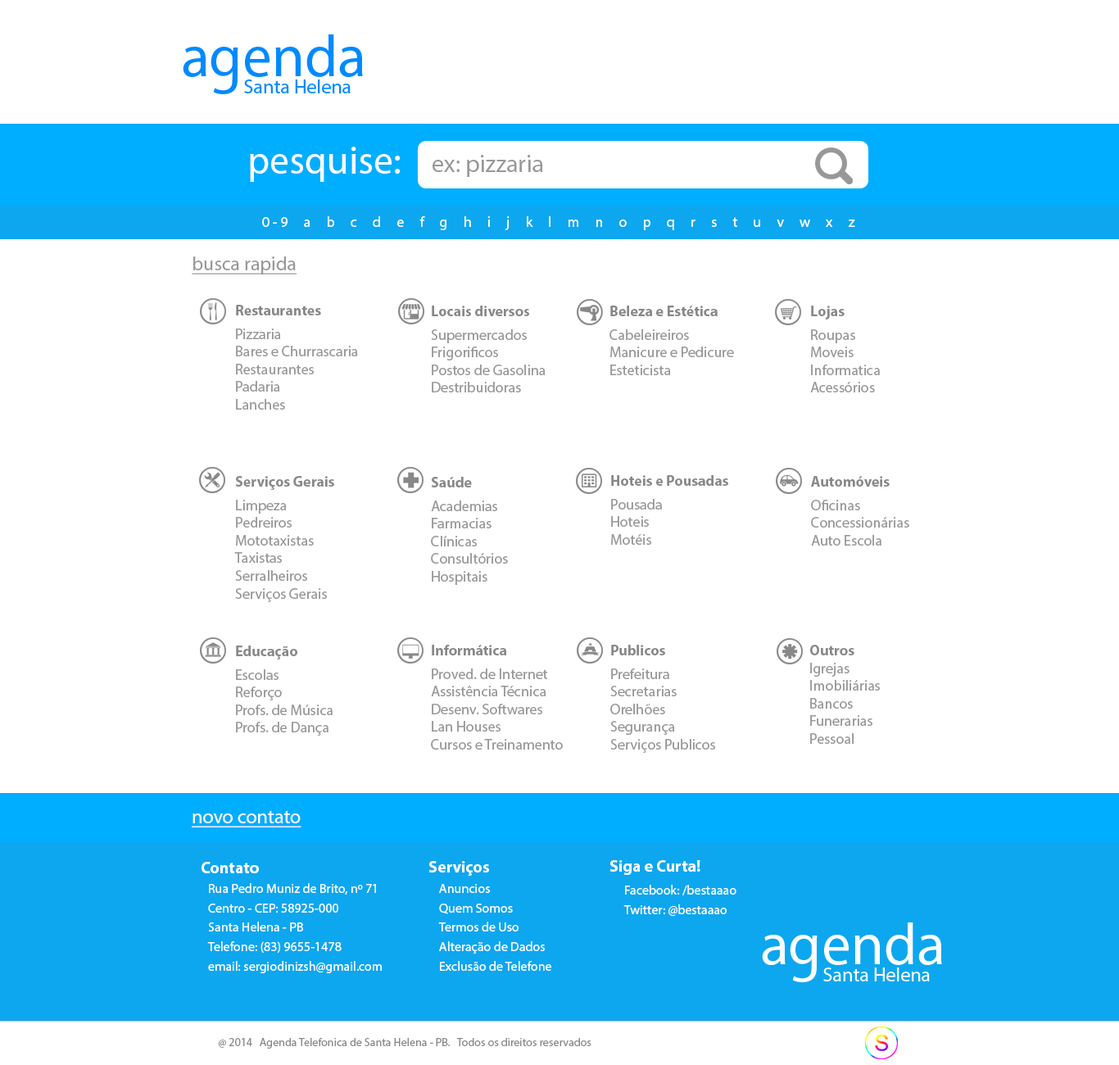
<style>
.page{position:relative;width:1119px;height:1065px;background:#ffffff}
.page>*{position:absolute;margin:0}
.t1{font:39.3px "MyriadPro-Regular";color:#ffffff}
.t2{font:24.6px "MyriadPro-Regular";color:#989898}
.t3{font:14.8px "MyriadPro-Regular";color:#ffffff}
.t4{font:19.7px "MyriadPro-Regular";color:#989898;text-decoration:underline}
.t5{font:14.8px "MyriadPro-Regular";color:#989898}
.t6{font:14.8px "MyriadPro-Bold";color:#878787}
.t7{font:14.8px "MyriadPro-Bold";color:#888888}
.t8{font:19.7px "MyriadPro-Regular";color:#ffffff;text-decoration:underline}
.t9{font:16.4px "MyriadPro-Bold";color:#ffffff}
.t10{font:13.1px "MyriadPro-Regular";color:#ffffff}
.t11{font:11.5px "MyriadPro-Regular";color:#888888}
</style>
<div class="page">
<p class="t1" style="left:250px;top:147px;width:150px;height:35px">pesquise:</p>
<p class="t2" style="left:433px;top:155px;width:110px;height:22px">ex: pizzaria</p>
<p class="t3" style="left:262px;top:216px;width:594px;height:14px">0 - 9     a     b     c     d     e     f     g     h     i     j     k     l     m     n     o     p     q     r     s     t     u     v     w     x     z</p>
<p class="t4" style="left:192px;top:256px;width:105px;height:19px">busca rapida</p>
<p class="t5" style="left:236px;top:305px;width:122px;height:105px"><span class="t6">Restaurantes<br></span>Pizzaria<br>Bares e Churrascaria<br>Restaurantes<br>Padaria<br>Lanches</p>
<p class="t5" style="left:431px;top:306px;width:115px;height:87px"><span class="t7">Locais diversos <br></span>Supermercados<br>Frigorificos<br>Postos de Gasolina<br>Destribuidoras</p>
<p class="t5" style="left:610px;top:306px;width:124px;height:69px"><span class="t7">Beleza e Estética<br></span>Cabeleireiros<br>Manicure e Pedicure<br>Esteticista</p>
<p class="t5" style="left:810px;top:306px;width:70px;height:87px"><span class="t7">Lojas<br></span>Roupas<br>Moveis<br>Informatica<br>Acessórios</p>
<p class="t5" style="left:234px;top:476px;width:100px;height:126px"><span class="t7">Serviços Gerais<br></span>Limpeza<br>Pedreiros<br>Mototaxistas<br>Taxistas<br>Serralheiros<br>Serviços Gerais</p>
<p class="t5" style="left:431px;top:477px;width:77px;height:108px"><span class="t7">Saúde<br></span>Academias<br>Farmacias<br>Clínicas<br>Consultórios<br>Hospitais</p>
<p class="t5" style="left:611px;top:475px;width:117px;height:70px"><span class="t7">Hoteis e Pousadas<br></span>Pousada<br>Hoteis<br>Motéis</p>
<p class="t5" style="left:811px;top:476px;width:99px;height:70px"><span class="t7">Automóveis<br></span>Oficinas<br>Concessionárias<br>Auto Escola</p>
<p class="t5" style="left:236px;top:646px;width:97px;height:90px"><span class="t7">Educação<br></span>Escolas<br>Reforço<br>Profs. de Música<br>Profs. de Dança</p>
<p class="t5" style="left:431px;top:645px;width:132px;height:105px"><span class="t7">Informática<br></span>Proved. de Internet<br>Assistência Técnica<br>Desenv. Softwares<br>Lan Houses<br>Cursos e Treinamento</p>
<p class="t5" style="left:610px;top:645px;width:105px;height:108px"><span class="t7">Publicos<br></span>Prefeitura<br>Secretarias<br>Orelhões<br>Segurança<br>Serviços Publicos</p>
<p class="t5" style="left:810px;top:645px;width:70px;height:99px"><span class="t7">Outros<br></span>Igrejas<br>Imobiliárias<br>Bancos<br>Funerarias<br>Pessoal</p>
<p class="t8" style="left:192px;top:810px;width:110px;height:18px">novo contato</p>
<p class="t9" style="left:202px;top:862px;width:57px;height:12px">Contato</p>
<p class="t9" style="left:429px;top:861px;width:60px;height:15px">Serviços</p>
<p class="t9" style="left:610px;top:860px;width:91px;height:15px">Siga e Curta!</p>
<p class="t10" style="left:207px;top:883px;width:175px;height:91px">Rua Pedro Muniz de Brito, nº 71<br>Centro - CEP: 58925-000<br>Santa Helena - PB<br>Telefone: (83) 9655-1478<br>email: sergiodinizsh@gmail.com</p>
<p class="t10" style="left:438px;top:884px;width:113px;height:87px">Anuncios<br>Quem Somos<br>Termos de Uso<br>Alteração de Dados<br>Exclusão de Telefone</p>
<p class="t10" style="left:624px;top:885px;width:113px;height:31px">Facebook: /bestaaao<br>Twitter: @bestaaao</p>
<p class="t11" style="left:219px;top:1038px;width:373px;height:11px">@ 2014   Agenda Telefonica de Santa Helena - PB.   Todos os direitos reservados</p>
</div>
